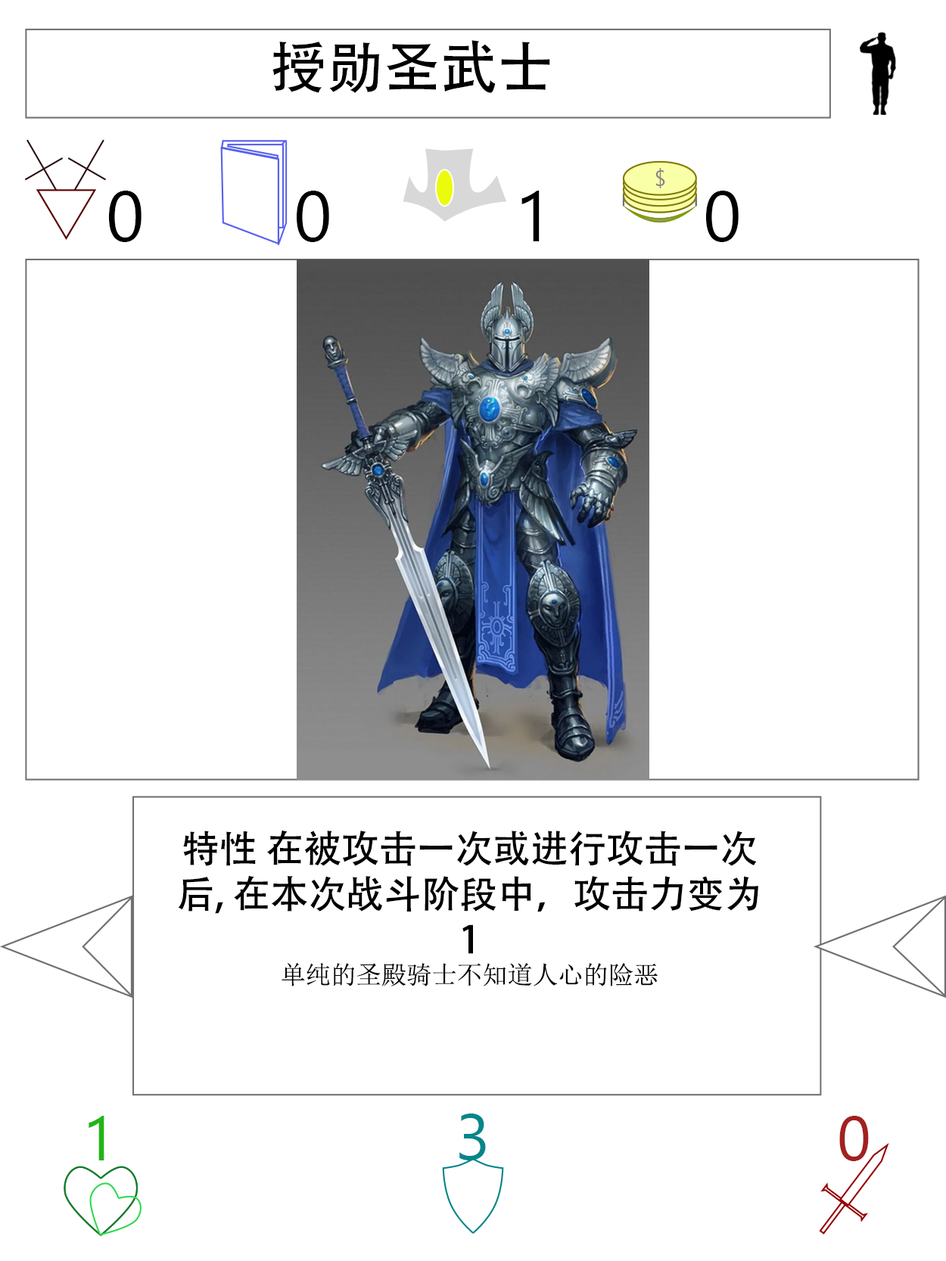
<style>
.page{position:relative;width:946px;height:1261px;background:#ffffff}
.page>*{position:absolute;margin:0}
.t1{font:56.7px "AdobeHeitiStd-Regular";color:#000000}
.t2{font:70.9px "SegoeUI";color:#000000}
.t3{font:37.8px "AdobeHeitiStd-Regular";color:#000000}
.t4{font:25.2px "SimSun";color:#000000}
.t5{font:63px "SegoeUI";color:#22b518}
.t6{font:64.6px "SegoeUI";color:#05868a}
.t7{font:63px "SegoeUI";color:#a32020}
</style>
<div class="page">
<p class="t1" style="left:272px;top:40px;width:278px;height:53px">授勋圣武士</p>
<p class="t2" style="left:109px;top:191px;width:32px;height:51px">0</p>
<p class="t2" style="left:297px;top:191px;width:32px;height:51px">0</p>
<p class="t2" style="left:521px;top:191px;width:18px;height:50px">1</p>
<p class="t2" style="left:706px;top:191px;width:32px;height:51px">0</p>
<p class="t3" style="left:178px;top:830px;width:580px;height:156px;text-align:center">特性 在被攻击一次或进行攻击一次后, 在本次战斗阶段中，攻击力变为1<br><span class="t4">单纯的圣殿骑士不知道人心的险恶</span></p>
<p class="t5" style="left:89px;top:1116px;width:15px;height:44px">1</p>
<p class="t6" style="left:459px;top:1114px;width:27px;height:46px">3</p>
<p class="t7" style="left:839px;top:1116px;width:29px;height:45px">0</p>
</div>
